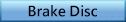
<style>
.page{position:relative;width:126px;height:22px}
.page>*{position:absolute;margin:0}
.t1{font:14px "MicrosoftJhengHeiBold";color:#010101}
</style>
<div class="page">
<p class="t1" style="left:28px;top:5px;width:69px;height:12px">Brake Disc</p>
</div>
